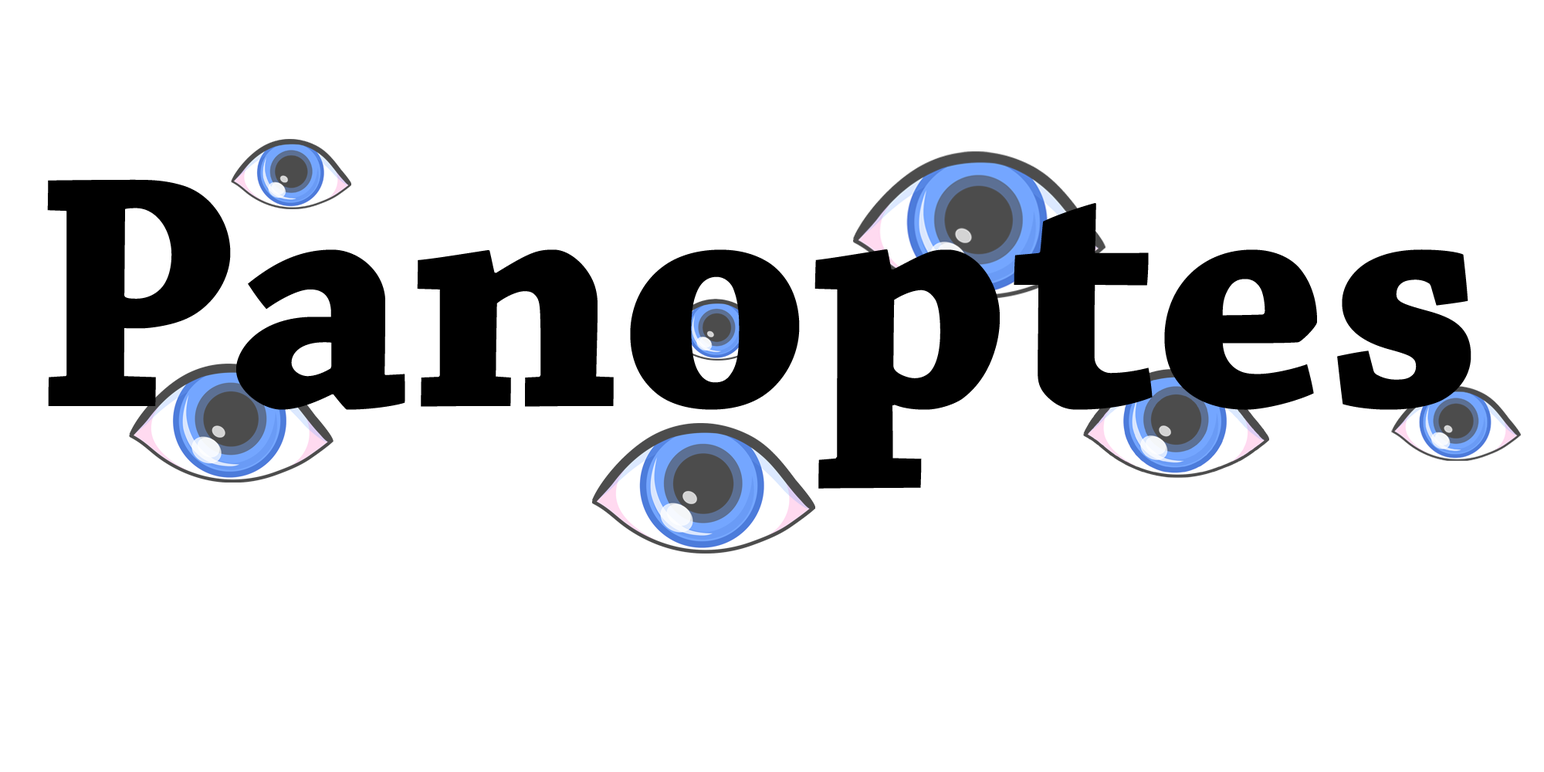
<style>
.page{position:relative;width:1544px;height:772px;background:#ffffff}
.page>*{position:absolute;margin:0}
.t1{font:347.5px "ChaparralPro-Bold";color:#000000}
</style>
<div class="page">
<p class="t1" style="left:47px;top:179px;width:1425px;height:310px">Panoptes</p>
</div>
